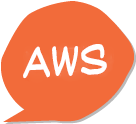
<style>
.page{position:relative;width:136px;height:124px;background:#f26b3a}
.page>*{position:absolute;margin:0}
.t1{font:48px "SuplexmentaryComicNC";color:#ffffff;scale:0.8 1}
</style>
<div class="page">
<p class="t1" style="left:23px;top:44px;width:84px;height:35px;rotate:-3deg">AWS</p>
</div>
